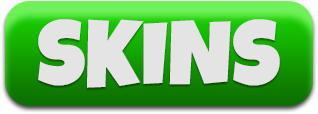
<style>
.page{position:relative;width:318px;height:114px;background:#e4e4e4}
.page>*{position:absolute;margin:0}
.t1{font:91px "LuckiestGuy-Regular";color:#e4e4e4;text-transform:uppercase}
</style>
<div class="page">
<p class="t1" style="left:38px;top:19px;width:242px;height:69px">Skins</p>
</div>
